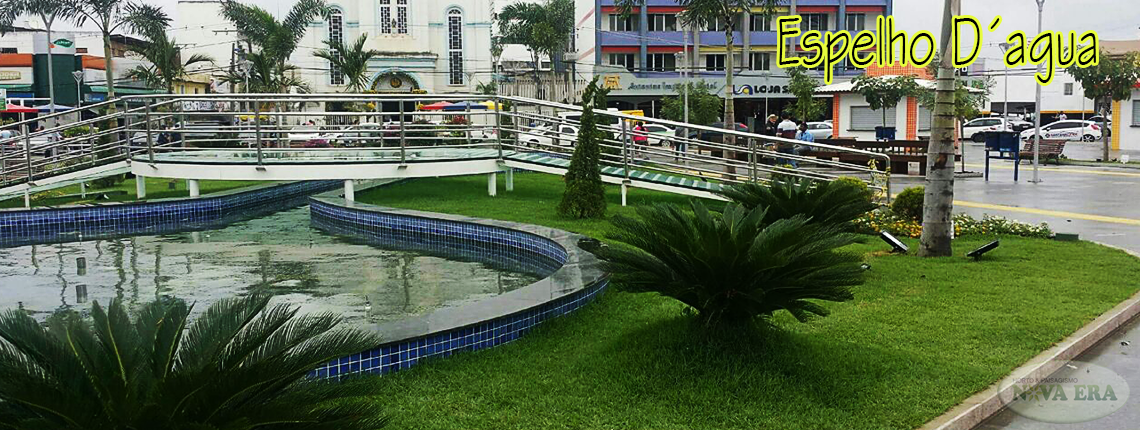
<style>
.page{position:relative;width:1140px;height:430px}
.page>*{position:absolute;margin:0}
.t1{font:69.8px "StylusBT";color:#000000;scale:0.67 1}
</style>
<div class="page">
<p class="t1" style="left:779px;top:18px;width:317px;height:65px">Espelho D´agua</p>
</div>
